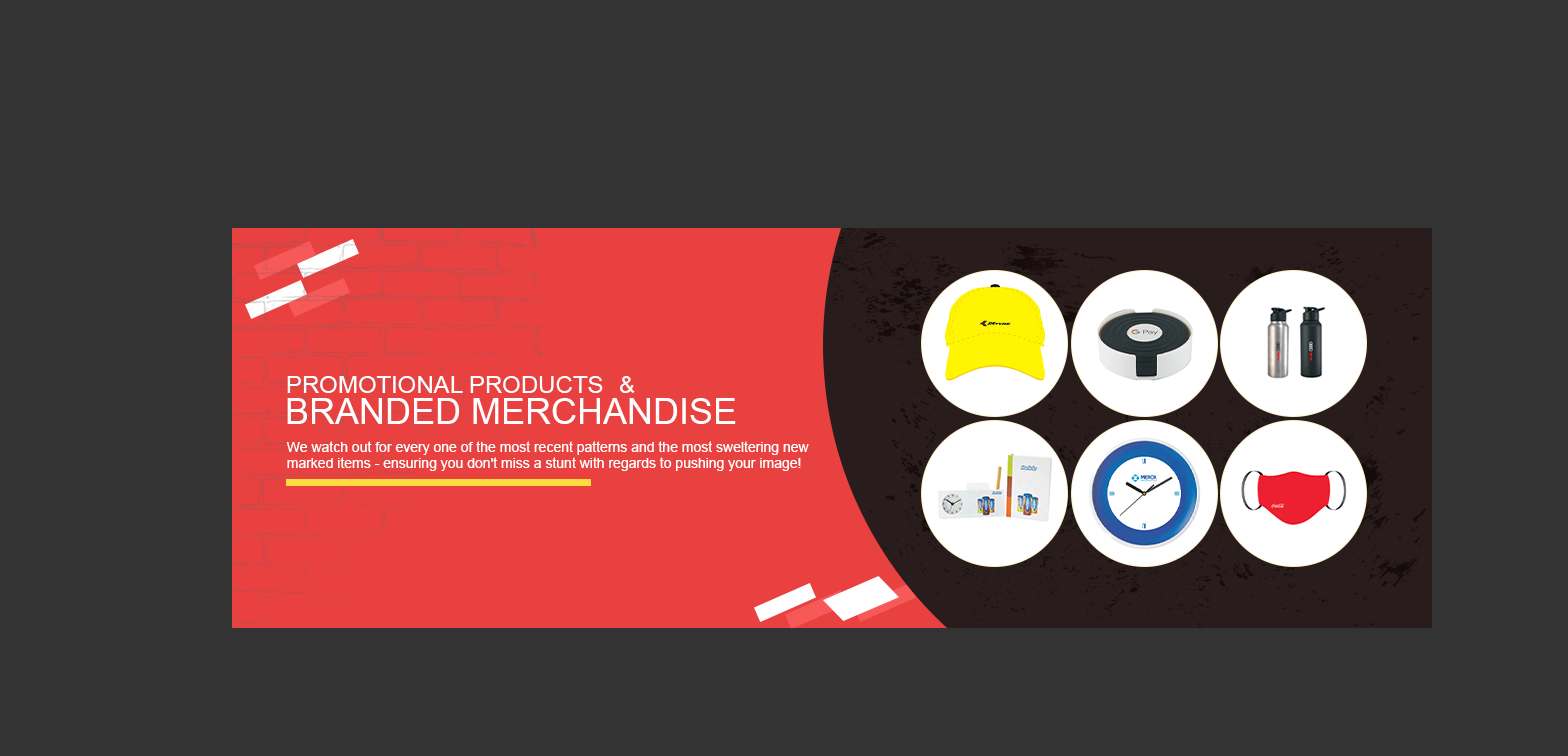
<style>
.page{position:relative;width:1568px;height:756px;background:#333333}
.page>*{position:absolute;margin:0}
.t1{font:24px "ArialMT";color:#ffffff;text-transform:uppercase}
.t2{font:36px "ArialMT";color:#ffffff;text-transform:uppercase}
.t3{font:14px "ArialMT";color:#ffffff}
</style>
<div class="page">
<p class="t1" style="left:287px;top:376px;width:316px;height:17px">Promotional Products</p>
<p class="t1" style="left:620px;top:376px;width:15px;height:17px">&amp;</p>
<p class="t2" style="left:287px;top:398px;width:449px;height:26px">Branded Merchandise</p>
<p class="t3" style="left:286px;top:441px;width:523px;height:30px">We watch out for every one of the most recent patterns and the most sweltering new marked items - ensuring you don't miss a stunt with regards to pushing your image!</p>
</div>
